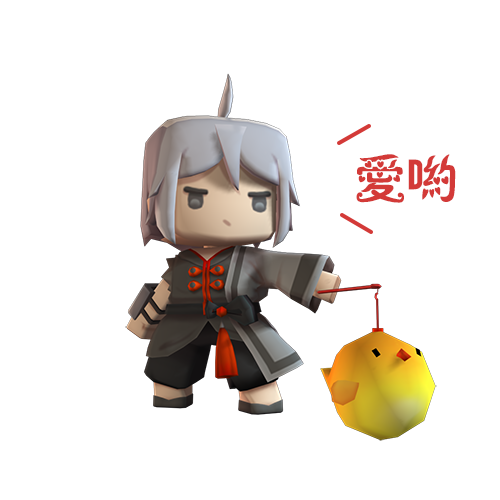
<style>
.page{position:relative;width:500px;height:500px;background:#ffffff}
.page>*{position:absolute;margin:0}
.t1{font:52.1px "HYy1gf";color:#d43a38}
</style>
<div class="page">
<p class="t1" style="left:356px;top:154px;width:100px;height:49px">爱哟</p>
</div>
